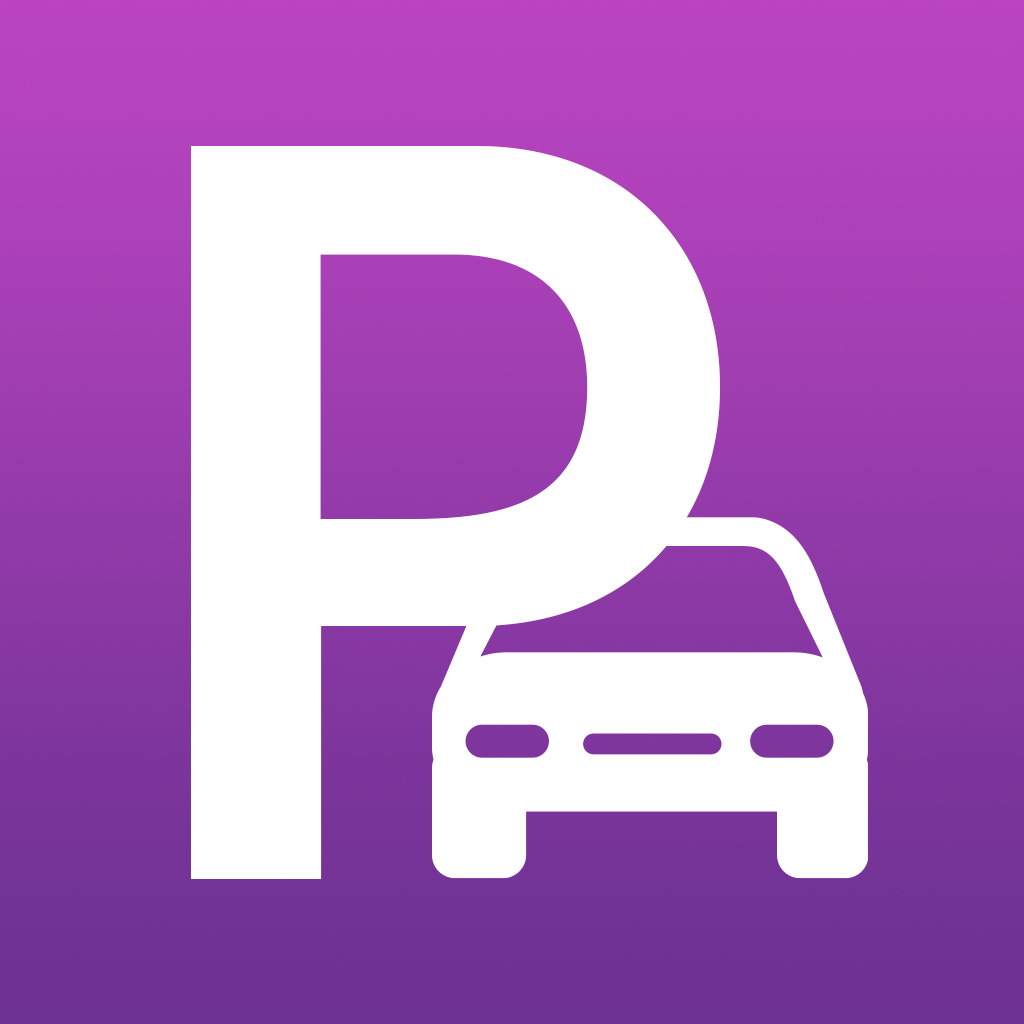
<style>
.page{position:relative;width:1024px;height:1024px;background:#ffffff}
.page>*{position:absolute;margin:0}
.t1{font:1100px "SanFranciscoText-Semibold";color:#ffffff}
</style>
<div class="page">
<p class="t1" style="left:191px;top:146px;width:529px;height:733px">P</p>
</div>
